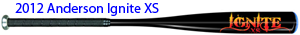
<style>
.page{position:relative;width:300px;height:35px;background:#ffffff}
.page>*{position:absolute;margin:0}
.t1{font:14px "MyriadPro-Regular";color:#0000ff}
</style>
<div class="page">
<p class="t1" style="left:15px;top:3px;width:144px;height:13px">2012 Anderson Ignite XS</p>
</div>
